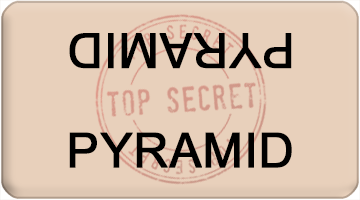
<style>
.page{position:relative;width:360px;height:200px;background:#e8d0bb}
.page>*{position:absolute;margin:0}
.t1{font:48px "ArialMT";color:#000000;font-weight:bold}
</style>
<div class="page">
<p class="t1" style="left:69px;top:33px;width:223px;height:36px;rotate:180deg">PYRAMID</p>
<p class="t1" style="left:69px;top:132px;width:223px;height:36px">PYRAMID</p>
</div>
